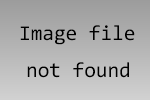
<style>
.page{position:relative;width:150px;height:100px}
.page>*{position:absolute;margin:0}
.t1{font:21.2px "YaHei-Consolas-Hybrid";color:#000000}
</style>
<div class="page">
<p class="t1" style="left:16px;top:30px;width:128px;height:57px">image file <br>not exist</p>
<p class="t1" style="left:20px;top:25px;width:115px;height:20px">Image file</p>
<p class="t1" style="left:27px;top:62px;width:102px;height:16px">not found</p>
</div>
